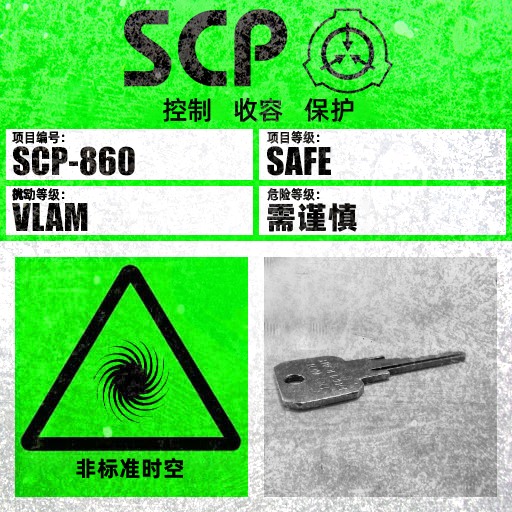
<style>
.page{position:relative;width:512px;height:512px}
.page>*{position:absolute;margin:0}
.t1{font:26px "AlibabaPuHuiTiM";color:#000000}
.t2{font:13.3px "AlibabaPuHuiTiM";letter-spacing:0.02em;color:#000000;scale:0.9 1}
.t3{font:13.3px "AlibabaPuHuiTiM";letter-spacing:0.02em;scale:0.9 1}
.t4{font:30.3px "AlibabaPuHuiTiH";letter-spacing:0.02em}
.t5{font:22px "AlibabaPuHuiTiB";letter-spacing:0.02em;color:#000000}
</style>
<div class="page">
<p class="t1" style="left:163px;top:97px;width:191px;height:26px">控制   收容   保护</p>
<p class="t2" style="left:12px;top:131px;width:53px;height:13px">项目编号：</p>
<p class="t3" style="left:267px;top:131px;width:53px;height:13px">项目等级：</p>
<p class="t2" style="left:12px;top:188px;width:53px;height:13px">扰动等级：</p>
<p class="t3" style="left:267px;top:188px;width:53px;height:13px">危险等级：</p>
<p class="t4" style="left:267px;top:203px;width:90px;height:29px">需谨慎</p>
<p class="t5" style="left:76px;top:458px;width:108px;height:21px">非标准时空</p>
</div>
